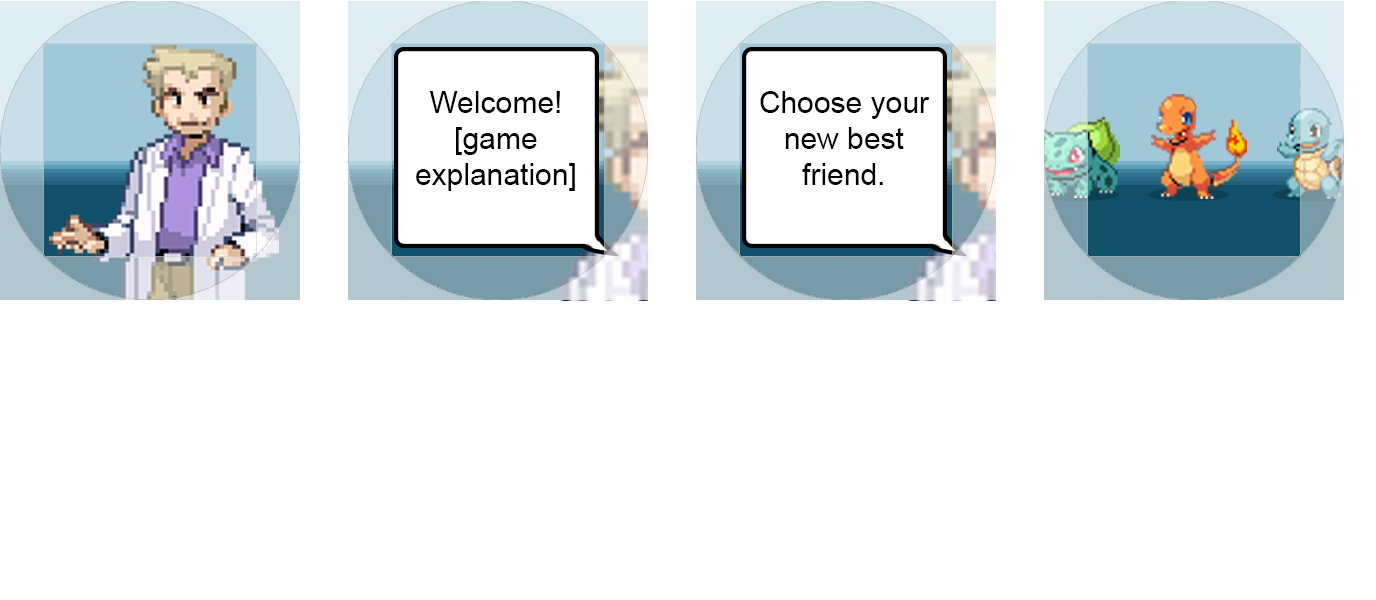
<style>
.page{position:relative;width:1376px;height:600px;background:#ffffff}
.page>*{position:absolute;margin:0}
.t1{font:30px "ArialMT";color:#000000}
</style>
<div class="page">
<p class="t1" style="left:416px;top:91px;width:159px;height:100px;text-align:center">Welcome!<br>[game <br>explanation]</p>
<p class="t1" style="left:760px;top:91px;width:170px;height:94px;text-align:center">Choose your new best friend.</p>
</div>
